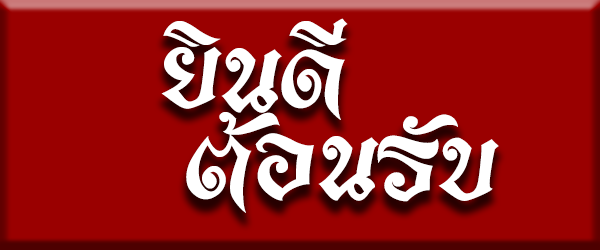
<style>
.page{position:relative;width:600px;height:250px;background:#9a0000}
.page>*{position:absolute;margin:0}
.t1{font:150px "SOV_LookSuea";color:#ffffff}
</style>
<div class="page">
<p class="t1" style="left:161px;top:18px;width:187px;height:102px">ยินดี</p>
<p class="t1" style="left:186px;top:112px;width:313px;height:101px">ต้อนรับ</p>
</div>
